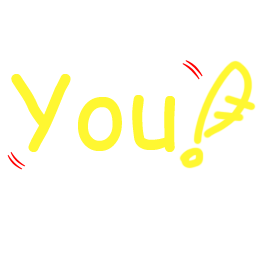
<style>
.page{position:relative;width:256px;height:256px;background:#ffffff}
.page>*{position:absolute;margin:0}
.t1{font:101px "ComicSansMS";color:#fff731}
</style>
<div class="page">
<p class="t1" style="left:11px;top:74px;width:164px;height:78px">You</p>
</div>
